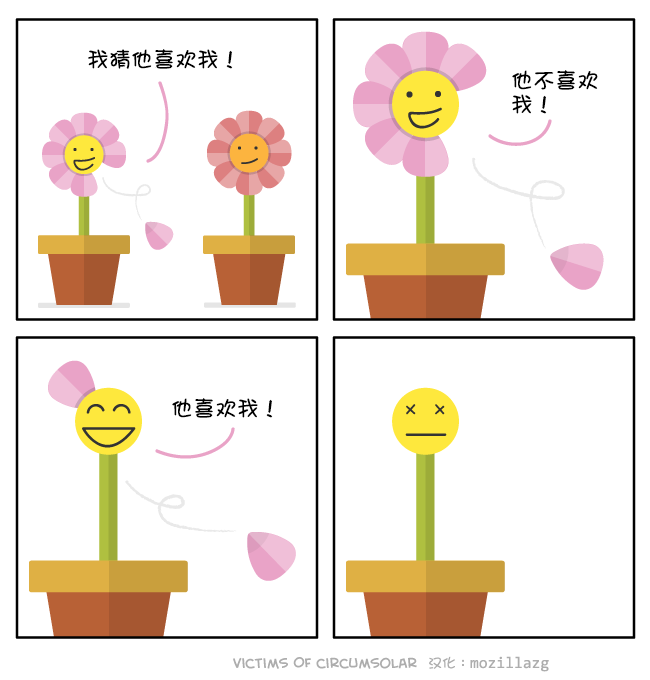
<style>
.page{position:relative;width:650px;height:680px;background:#ffffff}
.page>*{position:absolute;margin:0}
.t1{font:22px "DFGirl";color:#000000}
.t2{font:22px/24px "DFGirl";color:#000000}
</style>
<div class="page">
<p class="t1" style="left:88px;top:49px;width:145px;height:20px">我猜他喜欢我！</p>
<p class="t2" style="left:512px;top:70px;width:86px;height:44px">他不喜欢<br>我！</p>
<p class="t1" style="left:172px;top:398px;width:101px;height:20px">他喜欢我！</p>
</div>
